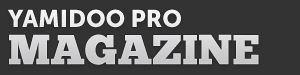
<style>
.page{position:relative;width:300px;height:75px;background:#333333}
.page>*{position:absolute;margin:0}
.t1{font:24px/29.3px "MuseoSans-900";color:#d6d6d8;text-transform:uppercase}
.t2{font:42px/37.3px "ChunkFive";color:#d6d6d8;text-transform:uppercase}
</style>
<div class="page">
<p class="t1" style="left:7px;top:9px;width:252px;height:56px;text-align:justify">Yamidoo Pro<br><span class="t2">Magazine</span></p>
</div>
